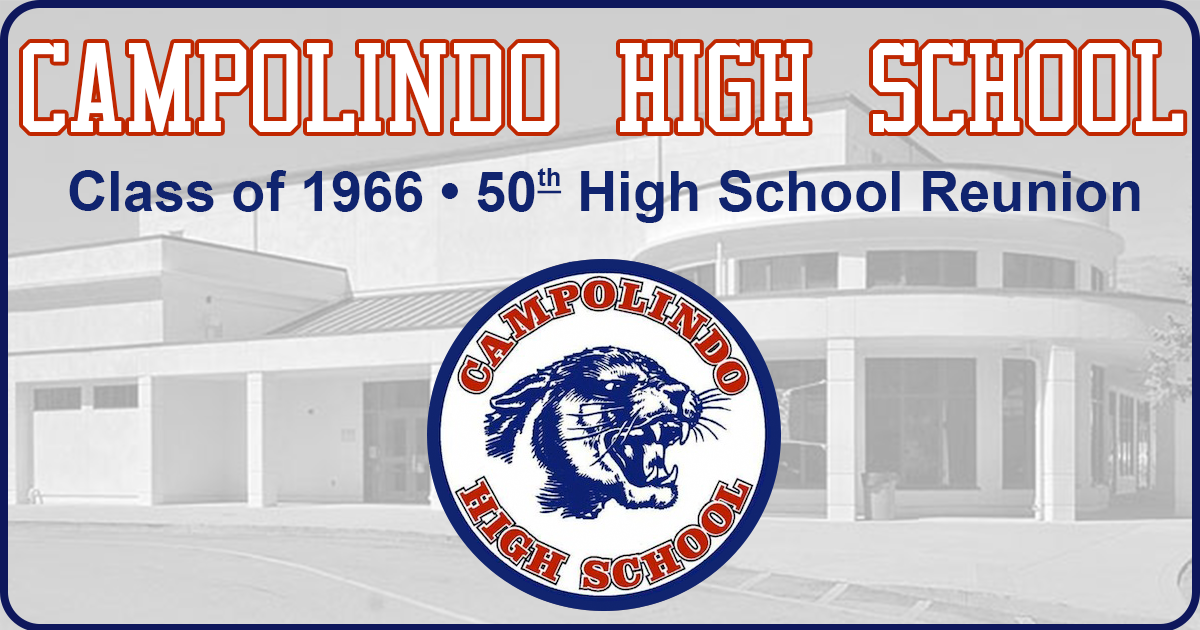
<style>
.page{position:relative;width:1200px;height:630px}
.page>*{position:absolute;margin:0}
.t1{font:111px "VarsityClassicSerifA";color:#ffffff}
.t2{font:56px "Arial-BoldMT";color:#10246f}
.t3{font:25px "Arial-BoldMT";color:#10246f;text-decoration:underline}
</style>
<div class="page">
<p class="t1" style="left:23px;top:43px;width:1161px;height:89px">Campolindo High School</p>
<p class="t2" style="left:69px;top:168px;width:1071px;height:55px">Class of 1966 • 50<span class="t3">th</span> High School Reunion</p>
</div>
